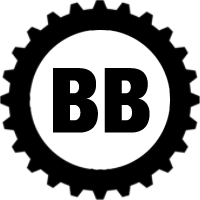
<style>
.page{position:relative;width:200px;height:200px;background:#ffffff}
.page>*{position:absolute;margin:0}
.t1{font:90px "HelveticaNeue-CondensedBlack";color:#000000}
</style>
<div class="page">
<p class="t1" style="left:53px;top:68px;width:97px;height:65px">BB</p>
</div>
